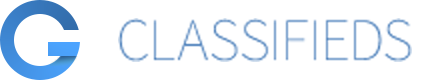
<style>
.page{position:relative;width:440px;height:80px;background:#ffffff}
.page>*{position:absolute;margin:0}
.t1{font:60px "SourceSansPro-ExtraLight";color:#5284bd;text-transform:uppercase}
</style>
<div class="page">
<p class="t1" style="left:118px;top:18px;width:294px;height:44px">CLASSIFIEDS</p>
</div>
